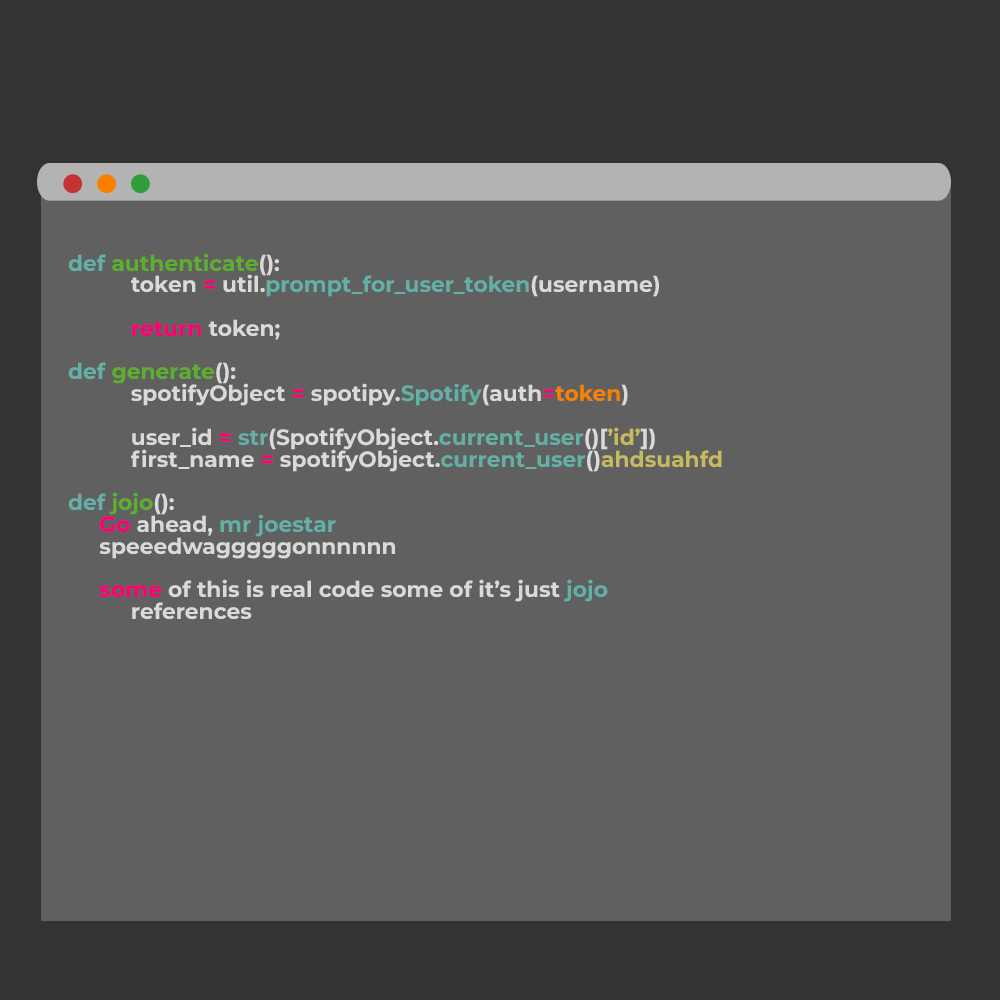
<style>
.page{position:relative;width:1000px;height:1000px;background:#606060}
.page>*{position:absolute;margin:0}
.t1{font:21.8px/21.8px "Montserrat-Bold";color:#dadada}
.t2{font:21.8px/21.8px "Montserrat-Bold";color:#63b0a6}
.t3{font:21.8px/21.8px "Montserrat-Bold";color:#5cb02e}
.t4{font:21.8px/21.8px "Montserrat-Bold";color:#ff0072}
.t5{font:21.8px/21.8px "Montserrat-Bold";color:#f10c70}
.t6{font:21.8px/21.8px "Montserrat-Bold";color:#fa8100}
.t7{font:21.8px/21.8px "Montserrat-Bold";color:#c6b95f}
</style>
<div class="page">
<p class="t1" style="left:68px;top:253px;width:654px;height:367px"><span class="t2">def </span><span class="t3">authenticate</span>():<br>  token <span class="t4">=</span> util.<span class="t2">prompt_for_user_token</span>(username)<br><br>  <span class="t4">return</span> token;<br><br><span class="t2">def </span><span class="t3">generate</span>():<br>  spotifyObject <span class="t4">= </span>spotipy.<span class="t2">Spotify</span>(auth<span class="t5">=</span><span class="t6">token</span>)<br>  <br>  user_id <span class="t4">= </span><span class="t2">str</span>(SpotifyObject.<span class="t2">current_user</span>()[<span class="t7">’id’</span>])<br>  first_name <span class="t4">=</span> spotifyObject.<span class="t2">current_user</span>()<span class="t7">ahdsuahfd<br><br></span><span class="t2">def </span><span class="t3">jojo</span>():<br> <span class="t4">Go</span> ahead,<span class="t2"> mr joestar<br></span> speeedwagggggonnnnnn<br> <br> <span class="t4">some</span> of this is real code some of it’s just <span class="t2">jojo<br></span>  references</p>
</div>
